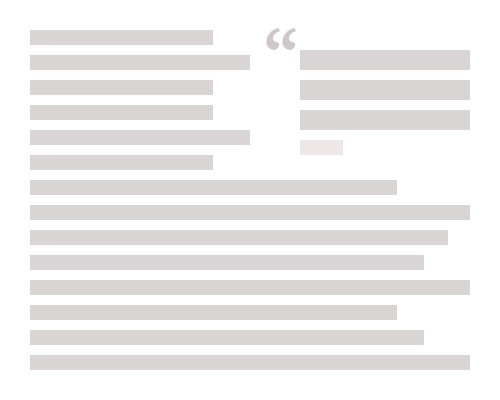
<style>
.page{position:relative;width:500px;height:400px;background:#ffffff}
.page>*{position:absolute;margin:0}
.t1{font:88.3px "PTSerif-Regular";color:#cfc8c8}
</style>
<div class="page">
<p class="t1" style="left:266px;top:28px;width:31px;height:22px">“</p>
</div>
